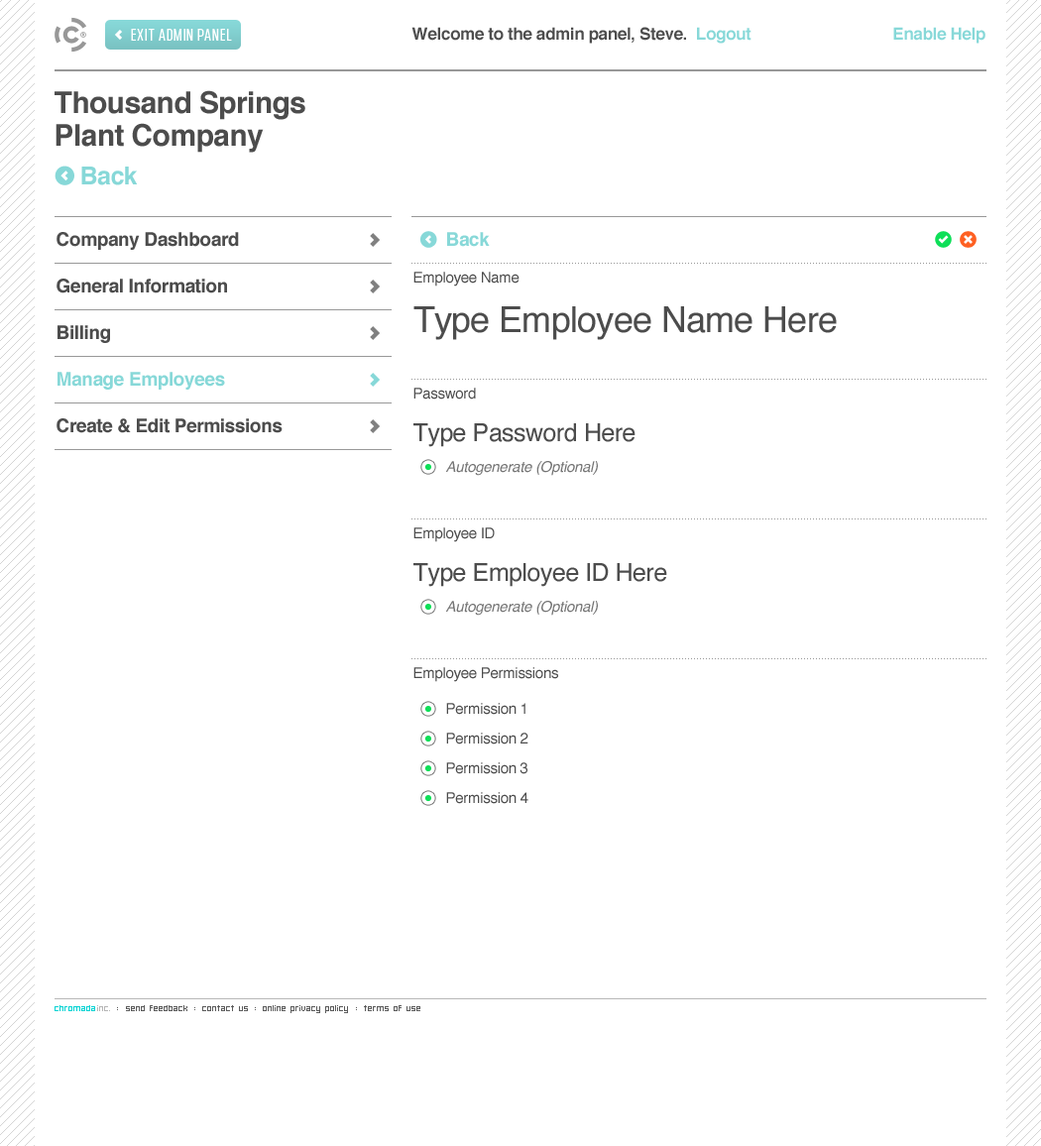
<style>
.page{position:relative;width:1041px;height:1146px;background:#ffffff}
.page>*{position:absolute;margin:0}
.t1{font:16.8px "ChromadicaCondensed";letter-spacing:0.06em;color:#ffffff}
.t2{font:16.8px "Helvetica-Bold";letter-spacing:-0.02em;color:#87d8d8}
.t3{font:16.8px "Helvetica-Bold";letter-spacing:-0.02em;color:#4c4c4c}
.t4{font:29.7px/32.7px "Helvetica-Bold";letter-spacing:-0.02em;color:#4c4c4c}
.t5{font:24.8px/38.7px "Helvetica-Bold";letter-spacing:-0.02em;color:#87d8d8}
.t6{font:18.8px/46.6px "Helvetica-Bold";letter-spacing:-0.02em;color:#4c4c4c}
.t7{font:18.8px/46.6px "Helvetica-Bold";letter-spacing:-0.02em;color:#87d8d8}
.t8{font:14.9px/29.7px "Helvetica";letter-spacing:-0.02em;color:#4c4c4c}
.t9{font:14.9px/36.7px "Helvetica";letter-spacing:-0.02em;color:#4c4c4c}
.t10{font:35.7px/49.6px "Helvetica";letter-spacing:-0.02em;color:#4c4c4c}
.t11{font:14.9px/19.8px "Helvetica";letter-spacing:-0.02em;color:#4c4c4c}
.t12{font:24.8px/42.6px "Helvetica";letter-spacing:-0.02em;color:#4c4c4c}
.t13{font:14.9px/30.7px "Helvetica-Oblique";letter-spacing:-0.02em;color:#757575}
.t14{font:14.9px/66.4px "Helvetica";letter-spacing:-0.02em;color:#4c4c4c}
.t15{font:14.9px/35.7px "Helvetica";letter-spacing:-0.02em;color:#4c4c4c}
.t16{font:7.9px "Hooge0655";color:#5b5b5b}
.t17{font:7.9px "Hooge0655";color:#00d3d3}
.t18{font:7.9px "Hooge0655";color:#b6b6b6}
.t19{font:7.9px "Hooge0655";color:#5b5b5b;text-transform:uppercase}
</style>
<div class="page">
<p class="t1" style="left:131px;top:29px;width:101px;height:12px">EXIT ADMIN PANEL</p>
<p class="t2" style="left:411px;top:27px;width:574px;height:17px"><span class="t3">Welcome to the admin panel, Steve.</span>  Logout                                 Enable Help</p>
<p class="t4" style="left:55px;top:90px;width:250px;height:95px">Thousand Springs <br>Plant Company<br><span class="t5">    Back</span></p>
<p class="t6" style="left:56px;top:232px;width:226px;height:201px">Company Dashboard<br>General Information<br>Billing<span class="t7"><br>Manage Employees<br></span>Create &amp; Edit Permissions</p>
<p class="t8" style="left:413px;top:232px;width:424px;height:572px"><span class="t7">Back<br></span><span class="t9">Employee Name<br></span><span class="t10">Type Employee Name Here<br><br></span><span class="t11">Password<br></span><span class="t12">Type Password Here<br></span><span class="t13">Autogenerate (Optional)<br></span><span class="t14">Employee ID<br></span><span class="t12">Type Employee ID Here<br></span><span class="t13">Autogenerate (Optional)<br></span><span class="t14">Employee Permissions<br></span><span class="t15">Permission 1<br></span>Permission 2<br>Permission 3<br>Permission 4</p>
<p class="t16" style="left:55px;top:1005px;width:365px;height:8px"><span class="t17">chromada</span><span class="t18">inc. </span><span class="t19">: </span>send feedback <span class="t19">: </span>contact us <span class="t19">: </span>online privacy policy <span class="t19">: </span>terms of use</p>
</div>
